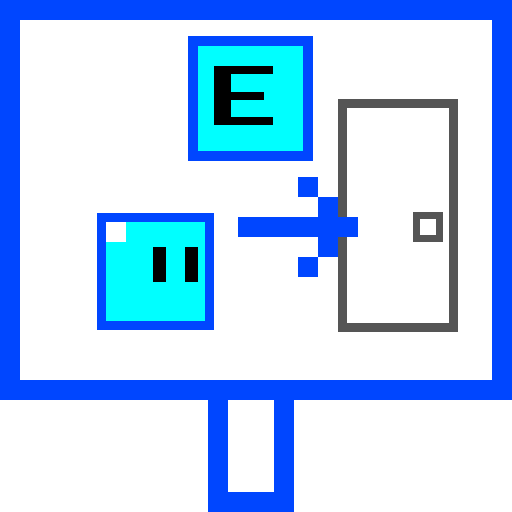
<style>
.page{position:relative;width:512px;height:512px;background:#ffffff}
.page>*{position:absolute;margin:0}
.t1{font:66.7px "PressStart2P-Regular";letter-spacing:0.075em;color:#000000}
</style>
<div class="page">
<p class="t1" style="left:214px;top:66px;width:59px;height:59px">E</p>
</div>
